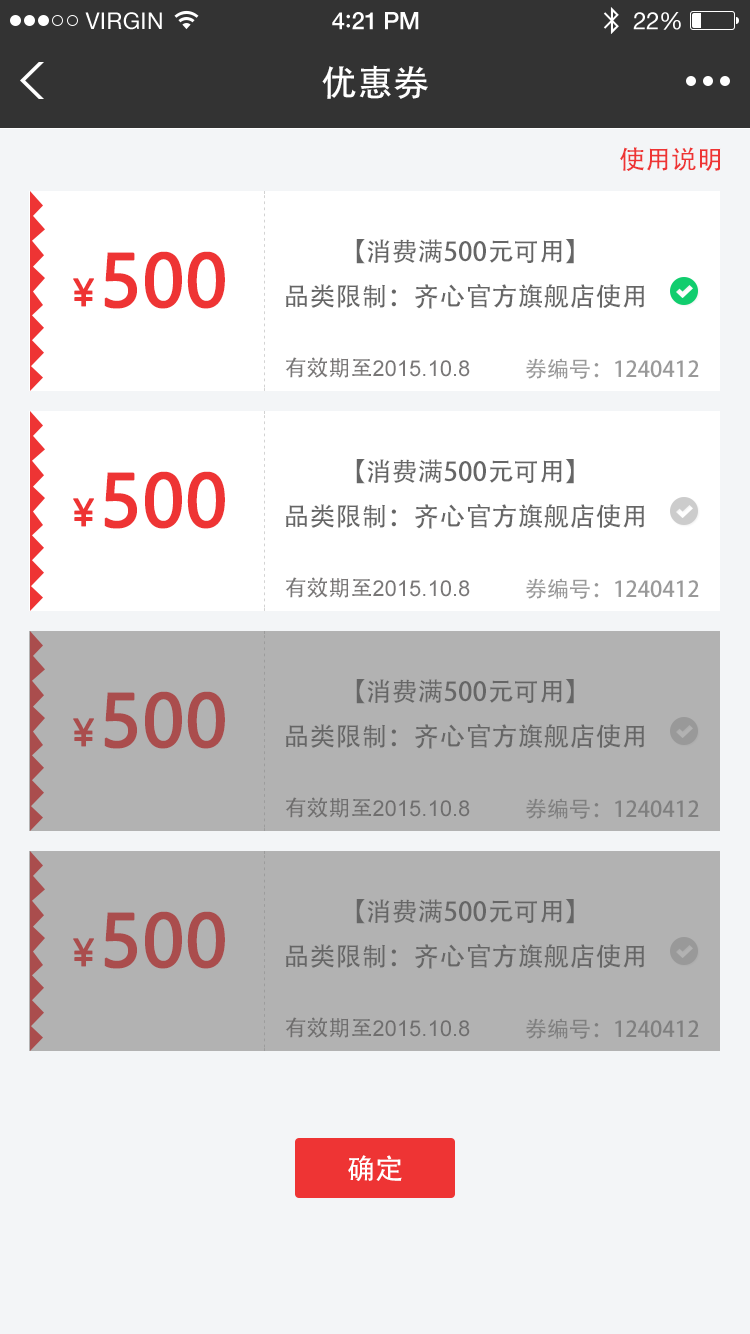
<style>
.page{position:relative;width:750px;height:1334px;background:#f3f5f7}
.page>*{position:absolute;margin:0}
.t1{font:36px "AdobeHeitiStd-Regular";color:#ffffff}
.t2{font:26px "AdobeHeitiStd-Regular";color:#ee3434}
.t3{font:26px "AdobeHeitiStd-Regular";color:#666666}
.t4{font:70px "MicrosoftYaHei";color:#ee3434;font-weight:bold}
.t5{font:36px "MicrosoftYaHei";color:#ee3434;font-weight:bold}
.t6{font:22px "ArialMT";color:#797777}
.t7{font:22px "AdobeHeitiStd-Regular";color:#797777}
.t8{font:22px "AdobeHeitiStd-Regular";color:#999999}
.t9{font:70px "MicrosoftYaHei";color:#aa4d4d;font-weight:bold}
.t10{font:36px "MicrosoftYaHei";color:#aa4d4d;font-weight:bold}
.t11{font:22px "AdobeHeitiStd-Regular";color:#7f7f7f}
.t12{font:28px "AdobeHeitiStd-Regular";color:#ffffff}
</style>
<div class="page">
<p class="t1" style="left:322px;top:65px;width:106px;height:34px">优惠券</p>
<p class="t2" style="left:620px;top:147px;width:101px;height:24px">使用说明</p>
<p class="t3" style="left:286px;top:239px;width:358px;height:70px;text-align:center">【消费满500元可用】<br>品类限制：齐心官方旗舰店使用</p>
<p class="t4" style="left:104px;top:251px;width:121px;height:58px">500</p>
<p class="t5" style="left:73px;top:278px;width:21px;height:29px">￥</p>
<p class="t6" style="left:285px;top:357px;width:185px;height:21px"><span class="t7">有效期至</span>2015.10.8</p>
<p class="t8" style="left:525px;top:358px;width:174px;height:21px">券编号：1240412</p>
<p class="t3" style="left:286px;top:459px;width:358px;height:70px;text-align:center">【消费满500元可用】<br>品类限制：齐心官方旗舰店使用</p>
<p class="t4" style="left:104px;top:471px;width:121px;height:58px">500</p>
<p class="t5" style="left:73px;top:498px;width:21px;height:29px">￥</p>
<p class="t6" style="left:285px;top:577px;width:185px;height:21px"><span class="t7">有效期至</span>2015.10.8</p>
<p class="t8" style="left:525px;top:578px;width:174px;height:21px">券编号：1240412</p>
<p class="t3" style="left:286px;top:679px;width:358px;height:70px;text-align:center">【消费满500元可用】<br>品类限制：齐心官方旗舰店使用</p>
<p class="t9" style="left:104px;top:691px;width:121px;height:58px">500</p>
<p class="t10" style="left:73px;top:718px;width:21px;height:29px">￥</p>
<p class="t6" style="left:285px;top:797px;width:185px;height:21px"><span class="t7">有效期至</span>2015.10.8</p>
<p class="t11" style="left:525px;top:798px;width:174px;height:21px">券编号：1240412</p>
<p class="t3" style="left:286px;top:899px;width:358px;height:70px;text-align:center">【消费满500元可用】<br>品类限制：齐心官方旗舰店使用</p>
<p class="t9" style="left:104px;top:911px;width:121px;height:58px">500</p>
<p class="t10" style="left:73px;top:938px;width:21px;height:29px">￥</p>
<p class="t6" style="left:285px;top:1017px;width:185px;height:21px"><span class="t7">有效期至</span>2015.10.8</p>
<p class="t11" style="left:525px;top:1018px;width:174px;height:21px">券编号：1240412</p>
<p class="t12" style="left:348px;top:1155px;width:54px;height:26px">确定</p>
</div>
